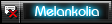
<style>
.page{position:relative;width:112px;height:24px}
.page>*{position:absolute;margin:0}
.t1{font:14px "BauhausCTT";letter-spacing:0.01em;color:#ffffff}
</style>
<div class="page">
<p class="t1" style="left:34px;top:6px;width:65px;height:10px">Melankolia</p>
</div>
